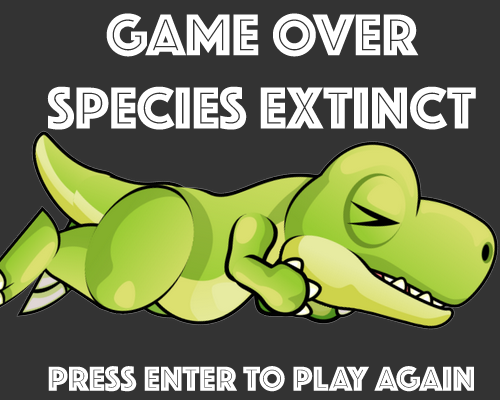
<style>
.page{position:relative;width:500px;height:400px;background:#333333}
.page>*{position:absolute;margin:0}
.t1{font:61px "Phosphate-Inline";color:#ffffff}
.t2{font:35.6px "Phosphate-Inline";color:#ffffff}
</style>
<div class="page">
<p class="t1" style="left:47px;top:13px;width:429px;height:379px;text-align:center">GAME OVER<br>SPECIES EXTINCT<br><br><br><br><span class="t2">PRESS ENTER TO PLAY AGAIN</span></p>
</div>
